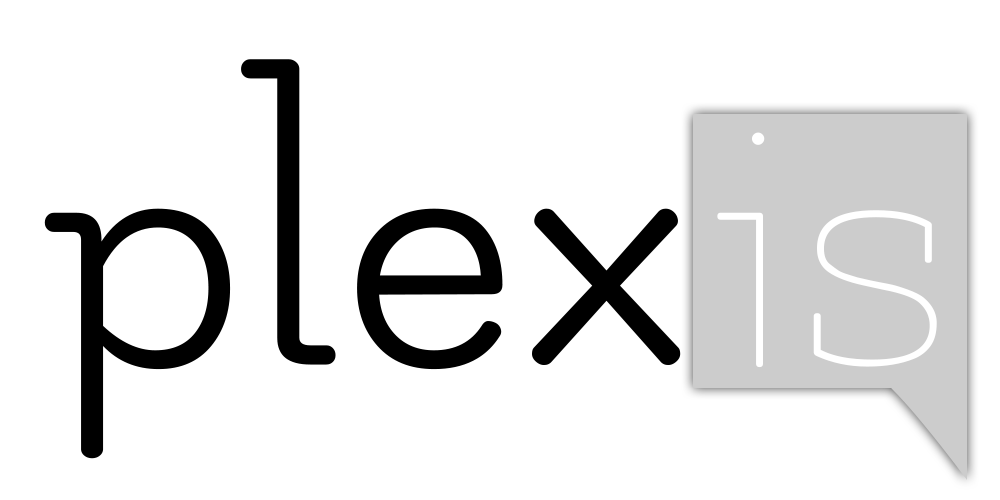
<style>
.page{position:relative;width:1000px;height:500px;background:#ffffff}
.page>*{position:absolute;margin:0}
.t1{font:406.8px "Flamenco-Regular";color:#000000}
.t2{font:406.8px "Flamenco-Regular";letter-spacing:0.06em;color:#000000}
.t3{font:406.8px "Flamenco-Light";color:#ffffff}
</style>
<div class="page">
<p class="t1" style="left:44px;top:59px;width:893px;height:400px">ple<span class="t2">x</span><span class="t3">is</span></p>
</div>
